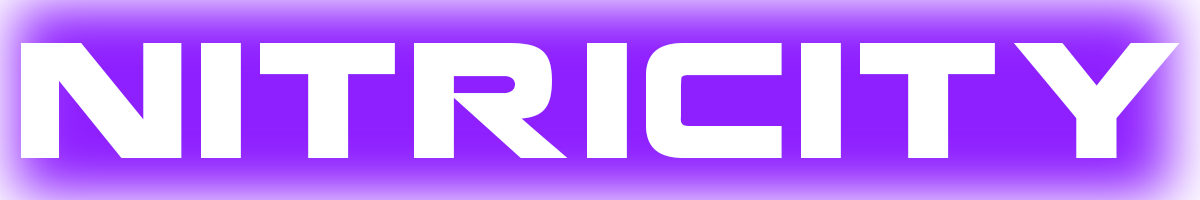
<style>
.page{position:relative;width:1200px;height:200px;background:#ffffff}
.page>*{position:absolute;margin:0}
.t1{font:162.7px "Coalition";letter-spacing:0.08em;color:#ffffff}
</style>
<div class="page">
<p class="t1" style="left:21px;top:43px;width:1159px;height:115px">nitricity</p>
</div>
